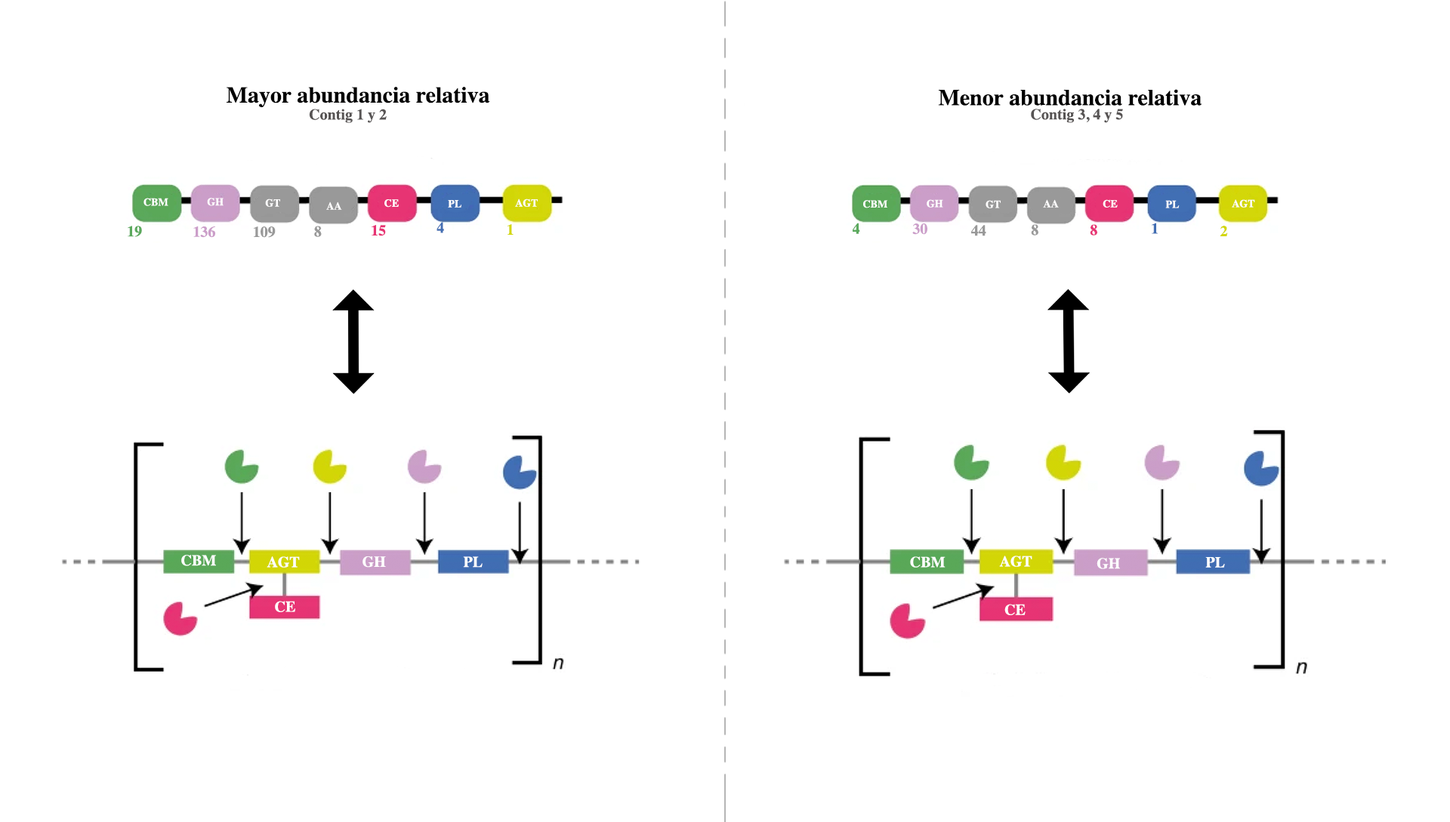
<style>
.page{position:relative;width:1450px;height:822px;background:#ffffff}
.page>*{position:absolute;margin:0}
.t1{font:22.7px "Times-Bold";color:#000000}
.t2{font:15.1px "Times-Bold";color:#575454}
.t3{font:10.6px "Times-Bold";color:#fffefe}
.t4{font:10.6px "Times-Bold";color:#ffffff}
.t5{font:15.1px "Times-Bold";color:#5ba95d}
.t6{font:15.1px "Times-Bold";color:#cb9ec9}
.t7{font:15.1px "Times-Bold";color:#999999}
.t8{font:15.1px "Times-Bold";color:#e73474}
.t9{font:15.1px "Times-Bold";color:#426eb3}
.t10{font:15.1px "Times-Bold";color:#d3d70a}
.t11{font:15.1px "Times-Bold";color:#ffffff}
</style>
<div class="page">
<p class="t1" style="left:227px;top:87px;width:263px;height:20px">Mayor abundancia relativa</p>
<p class="t1" style="left:938px;top:89px;width:264px;height:17px">Menor abundancia relativa</p>
<p class="t2" style="left:309px;top:109px;width:78px;height:14px">Contig 1 y 2</p>
<p class="t2" style="left:1031px;top:109px;width:92px;height:14px">Contig 3, 4 y 5</p>
<p class="t3" style="left:143px;top:198px;width:25px;height:8px">CBM</p>
<p class="t3" style="left:207px;top:198px;width:17px;height:8px">GH</p>
<p class="t3" style="left:265px;top:199px;width:15px;height:8px">GT</p>
<p class="t3" style="left:326px;top:202px;width:16px;height:8px">AA</p>
<p class="t3" style="left:384px;top:199px;width:15px;height:9px">CE</p>
<p class="t3" style="left:448px;top:200px;width:13px;height:8px">PL</p>
<p class="t3" style="left:515px;top:199px;width:23px;height:8px">AGT</p>
<p class="t3" style="left:863px;top:200px;width:24px;height:8px">CBM</p>
<p class="t3" style="left:927px;top:199px;width:16px;height:9px">GH</p>
<p class="t3" style="left:986px;top:200px;width:15px;height:8px">GT</p>
<p class="t3" style="left:1043px;top:199px;width:16px;height:9px">AA</p>
<p class="t3" style="left:1103px;top:199px;width:15px;height:9px">CE</p>
<p class="t3" style="left:1165px;top:200px;width:15px;height:8px">PL</p>
<p class="t4" style="left:1232px;top:199px;width:23px;height:9px">AGT</p>
<p class="t5" style="left:128px;top:226px;width:14px;height:11px">19</p>
<p class="t6" style="left:193px;top:226px;width:22px;height:12px">136</p>
<p class="t7" style="left:254px;top:227px;width:22px;height:11px">109</p>
<p class="t7" style="left:314px;top:226px;width:8px;height:11px">8</p>
<p class="t8" style="left:372px;top:225px;width:14px;height:11px">15</p>
<p class="t9" style="left:436px;top:222px;width:8px;height:11px">4</p>
<p class="t10" style="left:507px;top:224px;width:7px;height:11px">1</p>
<p class="t5" style="left:853px;top:223px;width:7px;height:11px">4</p>
<p class="t6" style="left:912px;top:224px;width:15px;height:11px">30</p>
<p class="t7" style="left:971px;top:225px;width:15px;height:11px">44</p>
<p class="t7" style="left:1031px;top:224px;width:7px;height:12px">8</p>
<p class="t8" style="left:1090px;top:224px;width:7px;height:12px">8</p>
<p class="t9" style="left:1152px;top:223px;width:6px;height:11px">1</p>
<p class="t10" style="left:1220px;top:226px;width:8px;height:10px">2</p>
<p class="t11" style="left:181px;top:555px;width:35px;height:11px">CBM</p>
<p class="t11" style="left:267px;top:557px;width:33px;height:11px">AGT</p>
<p class="t11" style="left:362px;top:556px;width:24px;height:12px">GH</p>
<p class="t11" style="left:463px;top:557px;width:20px;height:11px">PL</p>
<p class="t11" style="left:910px;top:557px;width:35px;height:11px">CBM</p>
<p class="t11" style="left:999px;top:556px;width:33px;height:11px">AGT</p>
<p class="t11" style="left:1205px;top:557px;width:20px;height:11px">PL</p>
<p class="t11" style="left:1097px;top:558px;width:23px;height:11px">GH</p>
<p class="t11" style="left:275px;top:601px;width:20px;height:11px">CE</p>
<p class="t11" style="left:1004px;top:604px;width:22px;height:11px">CE</p>
</div>
